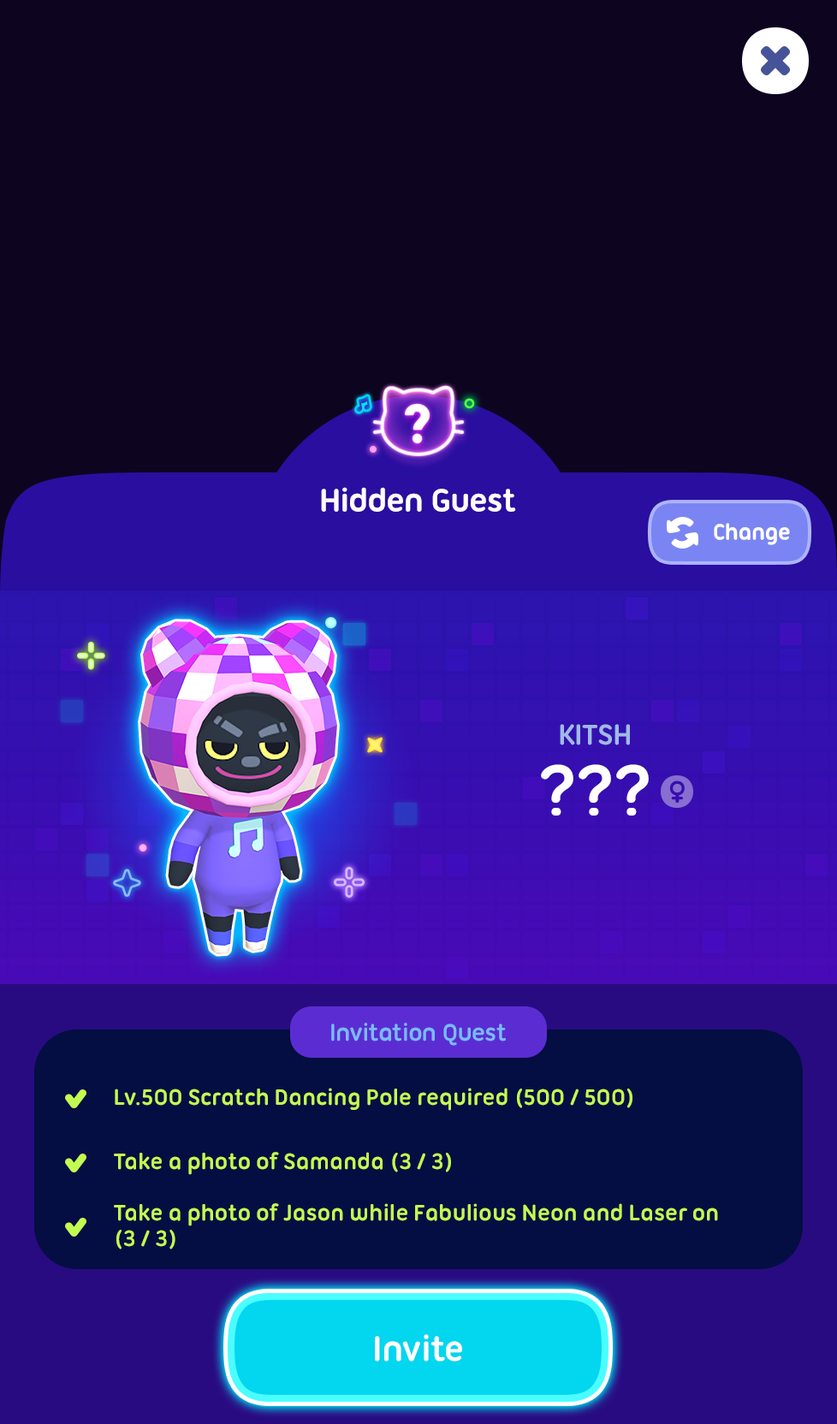
<style>
.page{position:relative;width:837px;height:1424px;background:#0d0420}
.page>*{position:absolute;margin:0}
.t1{font:34.2px "UbuntuTitling-Bold";letter-spacing:-0.025em;color:#ffffff}
.t2{font:24px "UbuntuTitling-Bold";letter-spacing:-0.025em;color:#ffffff}
.t3{font:30.8px "UbuntuTitling-Bold";letter-spacing:-0.025em;color:#a0b9e6;text-transform:uppercase}
.t4{font:77px "UbuntuTitling-Bold";letter-spacing:-0.025em;color:#ffffff}
.t5{font:25.7px "UbuntuTitling-Bold";letter-spacing:-0.025em;color:#79bbff}
.t6{font:24px "UbuntuTitling-Bold";letter-spacing:-0.025em;color:#c3fc50}
.t7{font:24px/25.7px "UbuntuTitling-Bold";letter-spacing:-0.025em;color:#c3fc50}
.t8{font:37.7px "UbuntuTitling-Bold";letter-spacing:-0.025em;color:#ffffff}
</style>
<div class="page">
<p class="t1" style="left:321px;top:487px;width:195px;height:25px">Hidden Guest</p>
<p class="t2" style="left:714px;top:523px;width:76px;height:22px">Change</p>
<p class="t3" style="left:560px;top:724px;width:70px;height:22px">Kitsh</p>
<p class="t4" style="left:541px;top:764px;width:108px;height:52px">???</p>
<p class="t5" style="left:331px;top:1023px;width:175px;height:23px">Invitation Quest</p>
<p class="t6" style="left:115px;top:1088px;width:518px;height:23px">Lv.500 Scratch Dancing Pole required (500 / 500)</p>
<p class="t6" style="left:114px;top:1152px;width:337px;height:23px">Take a photo of Samanda (3 / 3)</p>
<p class="t7" style="left:114px;top:1204px;width:604px;height:46px">Take a photo of Jason while Fabulious Neon and Laser on<br>(3 / 3)</p>
<p class="t8" style="left:375px;top:1334px;width:87px;height:28px">Invite</p>
</div>
